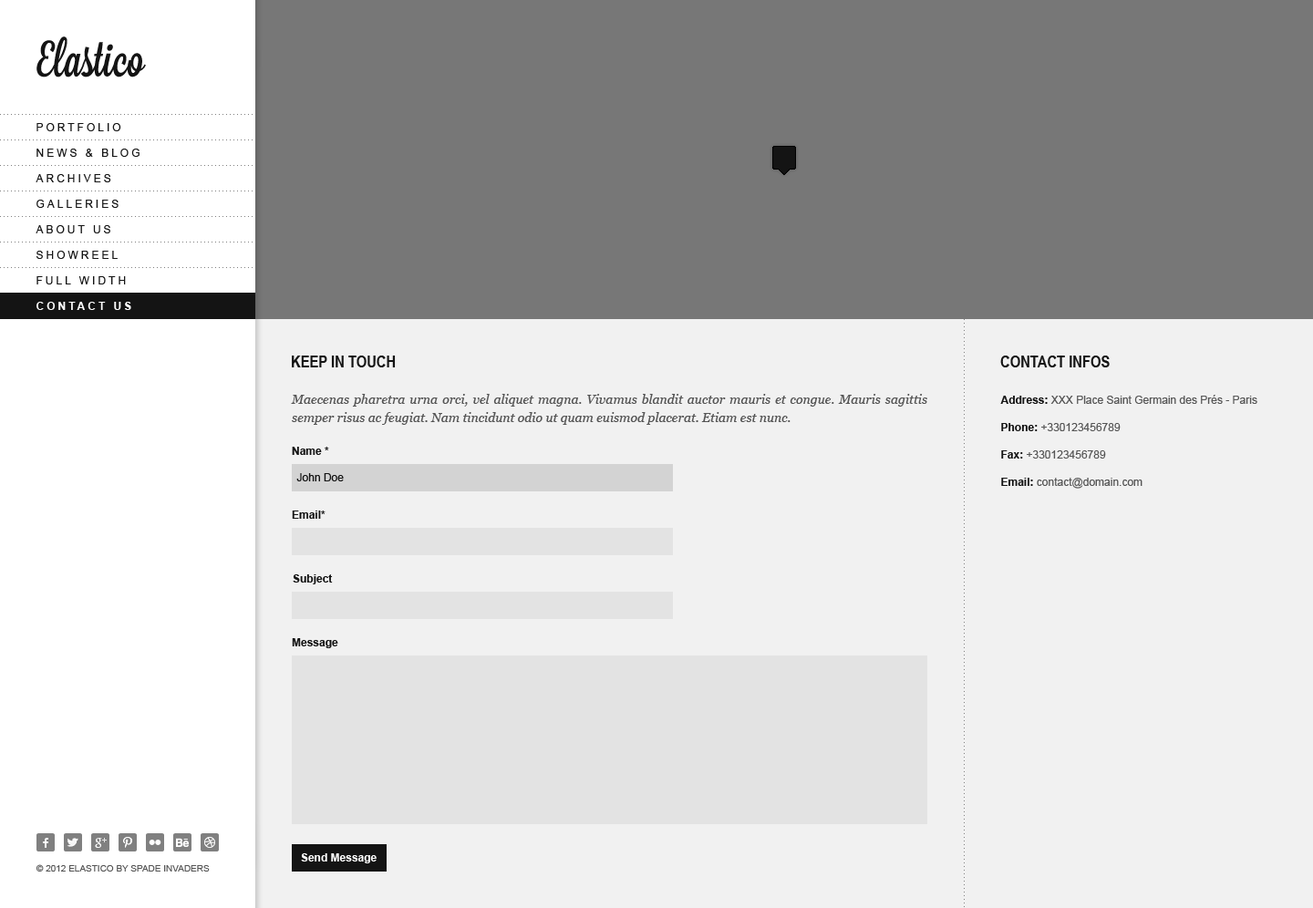
<style>
.page{position:relative;width:1313px;height:908px;background:#f1f1f1}
.page>*{position:absolute;margin:0}
.t1{font:10.9px "ArialMT";letter-spacing:0.25em;color:#141414;text-transform:uppercase}
.t2{font:10.9px "Arial-BoldMT";letter-spacing:0.25em;color:#ffffff;text-transform:uppercase}
.t3{font:16.4px "ArialNarrow-Bold";color:#141414;text-transform:uppercase}
.t4{font:12.8px/18.2px "Georgia-Italic";color:#555555}
.t5{font:10.9px/27.4px "ArialMT";color:#555555}
.t6{font:10.9px/27.4px "Arial-BoldMT";color:#141414}
.t7{font:10.9px "Arial-BoldMT";color:#141414}
.t8{font:10.9px "ArialMT";color:#141414}
.t9{font:10.9px "Arial-BoldMT";color:#ffffff}
.t10{font:9.1px "ArialMT";color:#555555;text-transform:uppercase}
</style>
<div class="page">
<p class="t1" style="left:36px;top:123px;width:85px;height:8px">portfolio</p>
<p class="t1" style="left:36px;top:149px;width:104px;height:8px">news &amp; blog</p>
<p class="t1" style="left:36px;top:174px;width:75px;height:8px">archives</p>
<p class="t1" style="left:36px;top:200px;width:83px;height:8px">galleries</p>
<p class="t1" style="left:36px;top:225px;width:74px;height:8px">about us</p>
<p class="t1" style="left:36px;top:251px;width:82px;height:8px">showreel</p>
<p class="t1" style="left:36px;top:276px;width:90px;height:8px">full width</p>
<p class="t2" style="left:36px;top:302px;width:95px;height:8px">contact us</p>
<p class="t3" style="left:292px;top:356px;width:104px;height:11px">keep in touch</p>
<p class="t3" style="left:1000px;top:356px;width:110px;height:11px">contact infos</p>
<p class="t4" style="left:291px;top:394px;width:636px;height:31px;text-align:justify">Maecenas pharetra urna orci, vel aliquet magna. Vivamus blandit auctor mauris et congue. Mauris sagittis semper risus ac feugiat. Nam tincidunt odio ut quam euismod placerat. Etiam est nunc.</p>
<p class="t5" style="left:1000px;top:395px;width:257px;height:94px"><span class="t6">Address: </span>XXX Place Saint Germain des Prés - Paris<br><span class="t6">Phone: </span>+330123456789<br><span class="t6">Fax: </span>+330123456789<br><span class="t6">Email: </span>contact@domain.com</p>
<p class="t7" style="left:292px;top:447px;width:37px;height:8px">Name *</p>
<p class="t8" style="left:296px;top:473px;width:48px;height:8px">John Doe</p>
<p class="t7" style="left:292px;top:511px;width:34px;height:8px">Email*</p>
<p class="t7" style="left:293px;top:574px;width:40px;height:10px">Subject</p>
<p class="t7" style="left:292px;top:638px;width:46px;height:10px">Message</p>
<p class="t9" style="left:301px;top:853px;width:76px;height:10px">Send Message</p>
<p class="t10" style="left:36px;top:864px;width:174px;height:9px">© 2012 elastico by spade invaders</p>
</div>
